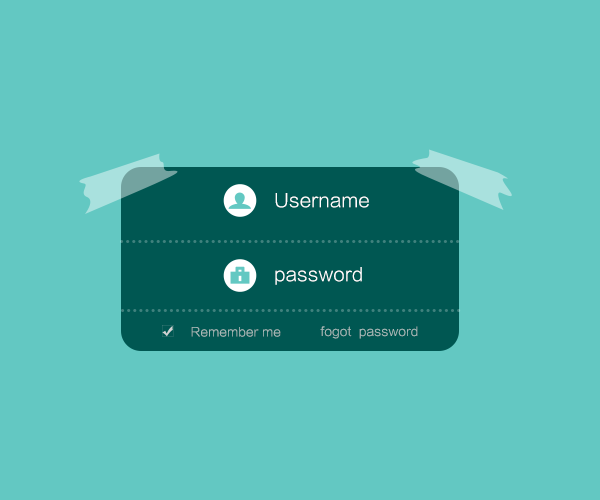
<style>
.page{position:relative;width:600px;height:500px;background:#63c8c2}
.page>*{position:absolute;margin:0}
.t1{font:18px "STHeitiSC-Light";color:#ffffff}
.t2{font:12px "STHeitiSC-Light";color:#a8bbb9}
</style>
<div class="page">
<p class="t1" style="left:275px;top:193px;width:94px;height:15px">Username</p>
<p class="t1" style="left:275px;top:267px;width:87px;height:18px">password</p>
<p class="t2" style="left:191px;top:327px;width:90px;height:10px">Remember me</p>
<p class="t2" style="left:320px;top:326px;width:98px;height:13px">fogot  password</p>
</div>
